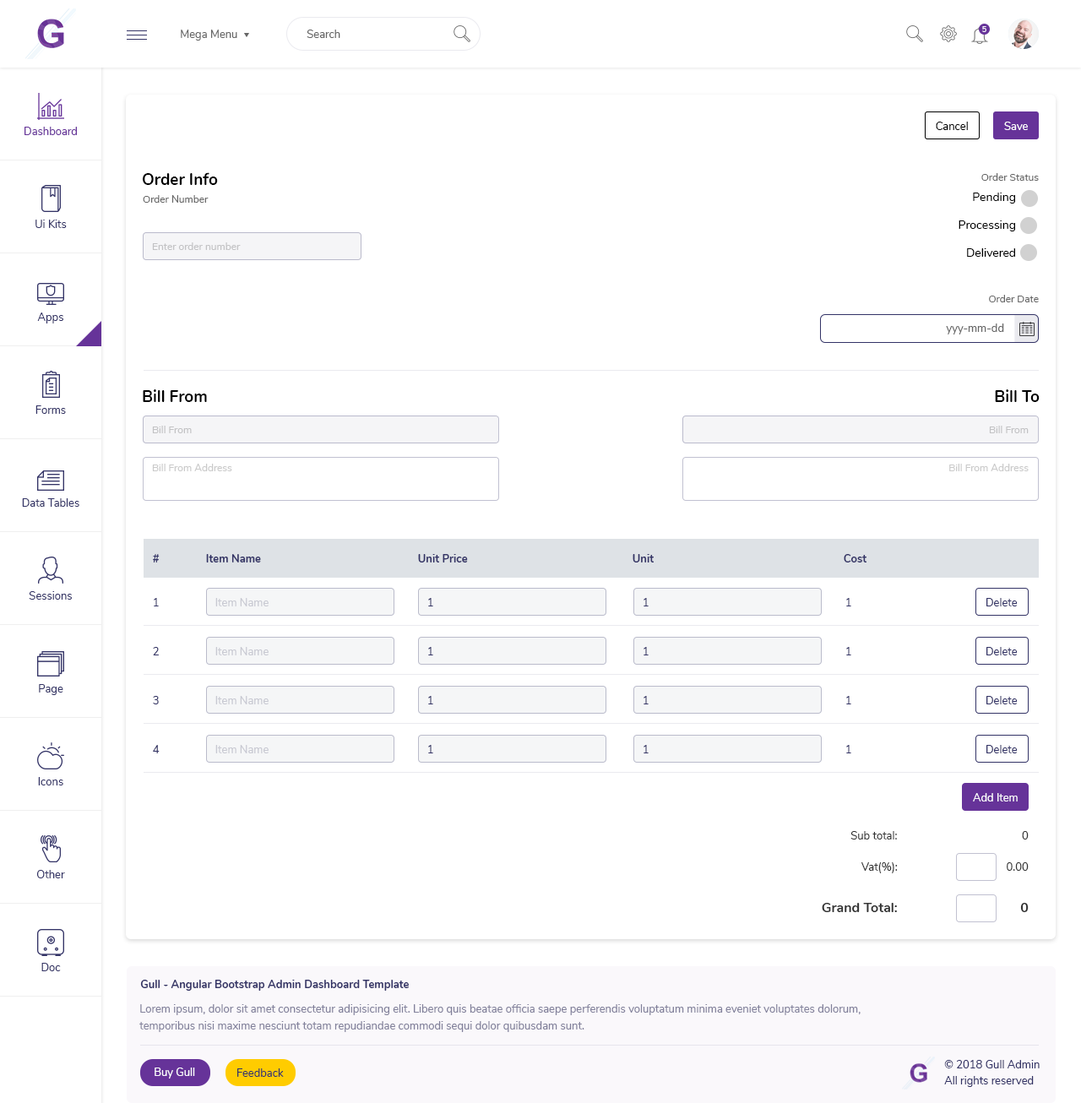
<style>
.page{position:relative;width:1081px;height:1103px;background:#ffffff}
.page>*{position:absolute;margin:0}
.t1{font:11px "Nunito-Regular";color:#666666}
.t2{font:7.6px "Nunito-SemiBold";color:#ffffff}
.t3{font:11px "Nunito-Regular";color:#000000}
.t4{font:11px "Nunito-Regular";color:#ffffff}
.t5{font:11px "Nunito-Regular";color:#663399}
.t6{font:16px "Nunito-Bold";color:#000000}
.t7{font:10.1px "Nunito-Regular";color:#666666}
.t8{font:11.8px "Nunito-Regular";color:#000000}
.t9{font:11px "Nunito-Regular";color:#333366}
.t10{font:10.1px "Nunito-Regular";color:#c2c2c4}
.t11{font:10.1px "Nunito-Regular";color:#cacaca}
.t12{font:11px "Nunito-Bold";color:#333366}
.t13{font:11px "Nunito-Regular";color:#c8c9d2}
.t14{font:11px "Nunito-Regular";color:#333333}
.t15{font:13.5px "Nunito-Bold";color:#333333}
.t16{font:11px/16.9px "Nunito-Regular";color:#82819b}
</style>
<div class="page">
<p class="t1" style="left:181px;top:30px;width:56px;height:11px">Mega Menu</p>
<p class="t1" style="left:307px;top:30px;width:33px;height:8px">Search</p>
<p class="t2" style="left:982px;top:26px;width:4px;height:6px">5</p>
<p class="t3" style="left:936px;top:122px;width:32px;height:8px">Cancel</p>
<p class="t4" style="left:1004px;top:122px;width:24px;height:8px">Save</p>
<p class="t5" style="left:24px;top:127px;width:53px;height:8px">Dashboard</p>
<p class="t6" style="left:143px;top:172px;width:75px;height:13px">Order Info</p>
<p class="t7" style="left:981px;top:173px;width:58px;height:8px">Order Status</p>
<p class="t7" style="left:143px;top:195px;width:66px;height:8px">Order Number</p>
<p class="t8" style="left:973px;top:193px;width:42px;height:11px">Pending</p>
<p class="t9" style="left:35px;top:220px;width:32px;height:8px">Ui Kits</p>
<p class="t8" style="left:959px;top:220px;width:56px;height:11px">Processing</p>
<p class="t10" style="left:152px;top:242px;width:89px;height:8px">Enter order number</p>
<p class="t8" style="left:967px;top:248px;width:48px;height:9px">Delivered</p>
<p class="t7" style="left:989px;top:295px;width:50px;height:7px">Order Date</p>
<p class="t9" style="left:37px;top:312px;width:26px;height:11px">Apps</p>
<p class="t1" style="left:946px;top:323px;width:58px;height:11px">yyy-mm-dd</p>
<p class="t6" style="left:143px;top:389px;width:64px;height:13px">Bill From</p>
<p class="t6" style="left:995px;top:389px;width:45px;height:13px">Bill To</p>
<p class="t9" style="left:35px;top:405px;width:31px;height:9px">Forms</p>
<p class="t10" style="left:152px;top:426px;width:40px;height:7px">Bill From</p>
<p class="t10" style="left:989px;top:426px;width:40px;height:7px">Bill From</p>
<p class="t11" style="left:152px;top:464px;width:80px;height:7px">Bill From Address</p>
<p class="t11" style="left:949px;top:464px;width:80px;height:7px">Bill From Address</p>
<p class="t9" style="left:22px;top:498px;width:57px;height:9px">Data Tables</p>
<p class="t12" style="left:153px;top:554px;width:7px;height:8px">#</p>
<p class="t12" style="left:206px;top:554px;width:55px;height:8px">Item Name</p>
<p class="t12" style="left:418px;top:554px;width:50px;height:8px">Unit Price</p>
<p class="t12" style="left:633px;top:554px;width:21px;height:8px">Unit</p>
<p class="t12" style="left:844px;top:554px;width:23px;height:8px">Cost</p>
<p class="t9" style="left:29px;top:591px;width:43px;height:9px">Sessions</p>
<p class="t9" style="left:154px;top:598px;width:5px;height:8px">1</p>
<p class="t13" style="left:215px;top:598px;width:54px;height:8px">Item Name</p>
<p class="t9" style="left:428px;top:598px;width:5px;height:8px">1</p>
<p class="t9" style="left:644px;top:598px;width:5px;height:8px">1</p>
<p class="t9" style="left:846px;top:598px;width:5px;height:8px">1</p>
<p class="t9" style="left:986px;top:598px;width:32px;height:8px">Delete</p>
<p class="t9" style="left:153px;top:647px;width:6px;height:8px">2</p>
<p class="t13" style="left:215px;top:647px;width:54px;height:8px">Item Name</p>
<p class="t9" style="left:428px;top:647px;width:5px;height:8px">1</p>
<p class="t9" style="left:644px;top:647px;width:5px;height:8px">1</p>
<p class="t9" style="left:846px;top:647px;width:5px;height:8px">1</p>
<p class="t9" style="left:986px;top:647px;width:32px;height:8px">Delete</p>
<p class="t9" style="left:39px;top:684px;width:24px;height:11px">Page</p>
<p class="t9" style="left:153px;top:696px;width:6px;height:8px">3</p>
<p class="t13" style="left:215px;top:696px;width:54px;height:8px">Item Name</p>
<p class="t9" style="left:428px;top:696px;width:5px;height:8px">1</p>
<p class="t9" style="left:644px;top:696px;width:5px;height:8px">1</p>
<p class="t9" style="left:846px;top:696px;width:5px;height:8px">1</p>
<p class="t9" style="left:986px;top:696px;width:32px;height:8px">Delete</p>
<p class="t9" style="left:153px;top:745px;width:7px;height:8px">4</p>
<p class="t13" style="left:215px;top:745px;width:54px;height:8px">Item Name</p>
<p class="t9" style="left:428px;top:745px;width:5px;height:8px">1</p>
<p class="t9" style="left:644px;top:745px;width:5px;height:8px">1</p>
<p class="t9" style="left:846px;top:745px;width:5px;height:8px">1</p>
<p class="t9" style="left:986px;top:745px;width:32px;height:8px">Delete</p>
<p class="t9" style="left:38px;top:777px;width:25px;height:8px">Icons</p>
<p class="t4" style="left:973px;top:793px;width:45px;height:9px">Add Item</p>
<p class="t14" style="left:850px;top:831px;width:47px;height:9px">Sub total:</p>
<p class="t14" style="left:1022px;top:831px;width:7px;height:9px">0</p>
<p class="t9" style="left:36px;top:870px;width:29px;height:8px">Other</p>
<p class="t14" style="left:861px;top:862px;width:37px;height:11px">Vat(%):</p>
<p class="t14" style="left:1007px;top:862px;width:22px;height:9px">0.00</p>
<p class="t15" style="left:822px;top:903px;width:75px;height:9px">Grand Total:</p>
<p class="t15" style="left:1020px;top:903px;width:9px;height:9px">0</p>
<p class="t9" style="left:41px;top:963px;width:20px;height:8px">Doc</p>
<p class="t12" style="left:140px;top:980px;width:269px;height:11px">Gull - Angular Bootstrap Admin Dashboard Template</p>
<p class="t16" style="left:139px;top:1004px;width:722px;height:28px">Lorem ipsum, dolor sit amet consectetur adipisicing elit. Libero quis beatae officia saepe perferendis voluptatum minima eveniet voluptates dolorum, <br>temporibus nisi maxime nesciunt totam repudiandae commodi sequi dolor quibusdam sunt.</p>
<p class="t9" style="left:944px;top:1060px;width:96px;height:8px">© 2018 Gull Admin</p>
<p class="t4" style="left:155px;top:1068px;width:40px;height:11px">Buy Gull</p>
<p class="t9" style="left:237px;top:1068px;width:47px;height:9px">Feedback</p>
<p class="t9" style="left:944px;top:1076px;width:90px;height:11px">All rights reserved</p>
</div>
